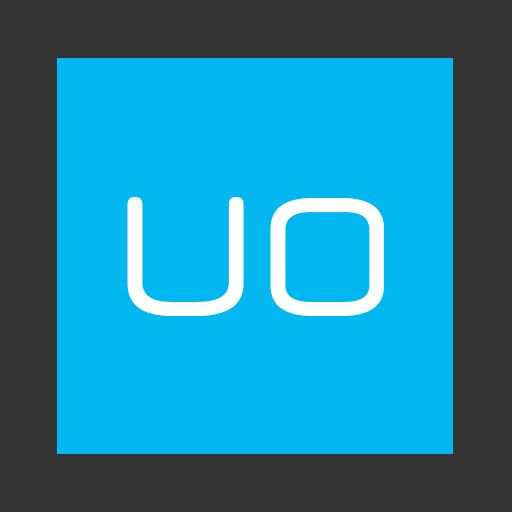
<style>
.page{position:relative;width:512px;height:512px;background:#00b7ef}
.page>*{position:absolute;margin:0}
.t1{font:169px "NeuropolXFree";color:#ffffff;scale:0.83 1}
</style>
<div class="page">
<p class="t1" style="left:127px;top:197px;width:257px;height:119px">UO</p>
</div>
